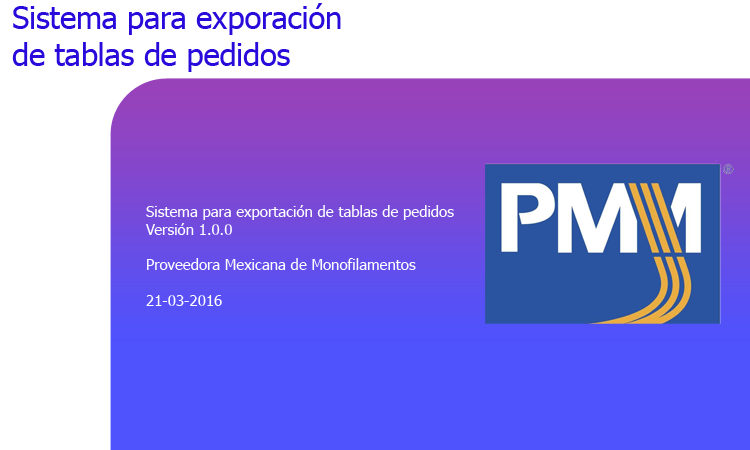
<style>
.page{position:relative;width:750px;height:450px;background:#ffffff}
.page>*{position:absolute;margin:0}
.t1{font:30.6px "Tahoma";color:#280bdb}
.t2{font:15px "Tahoma";color:#ffffff}
</style>
<div class="page">
<p class="t1" style="left:12px;top:3px;width:329px;height:69px">Sistema para exporación <br>de tablas de pedidos</p>
<p class="t2" style="left:146px;top:205px;width:308px;height:101px">Sistema para exportación de tablas de pedidos<br>Versión 1.0.0<br><br>Proveedora Mexicana de Monofilamentos<br><br>21-03-2016</p>
</div>
